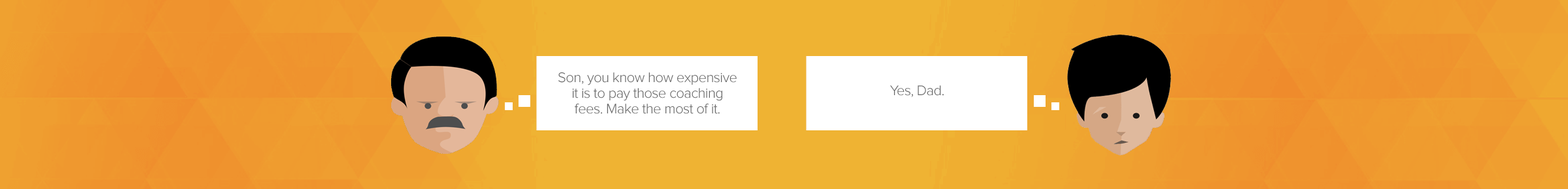
<style>
.page{position:relative;width:1568px;height:189px}
.page>*{position:absolute;margin:0}
.t1{font:14.4px/15.7px "ProximaNova-Light";letter-spacing:-0.025em;color:#676767}
.t2{font:14.4px "ProximaNova-Light";letter-spacing:-0.025em;color:#676767}
</style>
<div class="page">
<p class="t1" style="left:558px;top:72px;width:179px;height:42px;text-align:center">Son, you know how expensive it is to pay those coaching fees. Make the most of it.</p>
<p class="t2" style="left:890px;top:86px;width:54px;height:11px">Yes, Dad.</p>
</div>
